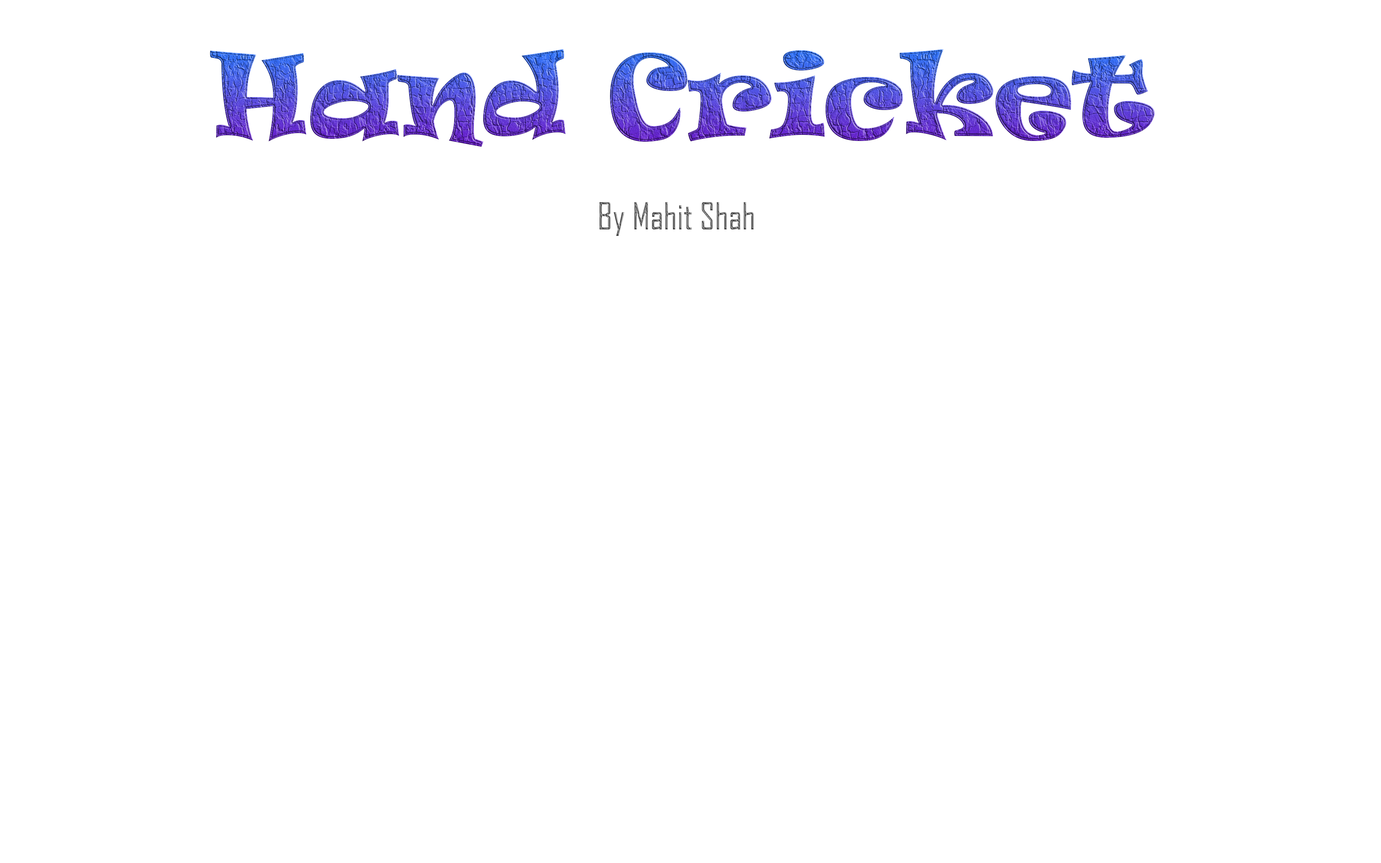
<style>
.page{position:relative;width:1381px;height:863px;background:#ffffff}
.page>*{position:absolute;margin:0}
.t1{font:107.9px "Ravie"}
.t2{font:36px "AgencyFB-Reg"}
</style>
<div class="page">
<p class="t1" style="left:210px;top:49px;width:945px;height:98px">Hand Cricket</p>
<p class="t2" style="left:600px;top:202px;width:154px;height:34px">By Mahit Shah</p>
</div>
